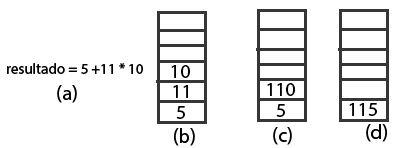
<style>
.page{position:relative;width:407px;height:148px;background:#ffffff}
.page>*{position:absolute;margin:0}
.t1{font:15px "MyriadHebrew-Regular";color:#000000}
.t2{font:20px "MyriadHebrew-Regular";color:#000000}
</style>
<div class="page">
<p class="t1" style="left:7px;top:63px;width:136px;height:11px">resultado = 5 +11 * 10</p>
<p class="t2" style="left:171px;top:65px;width:19px;height:13px">10</p>
<p class="t2" style="left:57px;top:85px;width:20px;height:18px">(a)</p>
<p class="t2" style="left:173px;top:85px;width:15px;height:13px">11</p>
<p class="t2" style="left:267px;top:83px;width:28px;height:13px">110</p>
<p class="t2" style="left:176px;top:106px;width:9px;height:13px">5</p>
<p class="t2" style="left:276px;top:104px;width:9px;height:13px">5</p>
<p class="t2" style="left:349px;top:103px;width:28px;height:13px">115</p>
<p class="t2" style="left:366px;top:124px;width:21px;height:18px">(d)</p>
<p class="t2" style="left:174px;top:128px;width:21px;height:18px">(b)</p>
<p class="t2" style="left:273px;top:127px;width:19px;height:18px">(c)</p>
</div>
